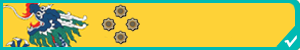
<style>
.page{position:relative;width:300px;height:50px;background:#fed237}
.page>*{position:absolute;margin:0}
.t1{font:12px "STHupo";color:#ffffff;font-weight:bold}
</style>
<div class="page">
<p class="t1" style="left:284px;top:35px;width:13px;height:13px">√</p>
</div>
